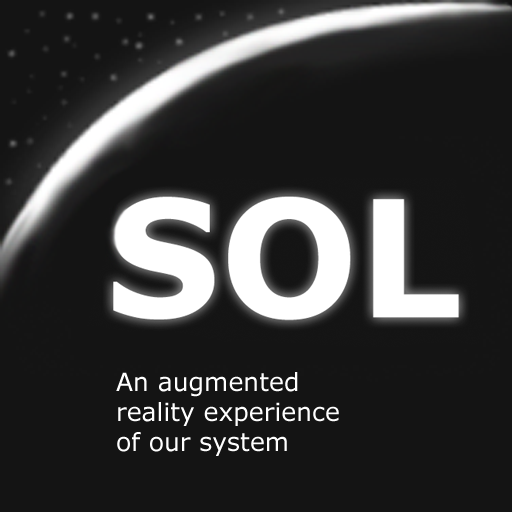
<style>
.page{position:relative;width:512px;height:512px;background:#141414}
.page>*{position:absolute;margin:0}
.t1{font:25px "Verdana";color:#ffffff}
</style>
<div class="page">
<p class="t1" style="left:116px;top:372px;width:223px;height:84px">An augmented <br>reality experience <br>of our system</p>
</div>
